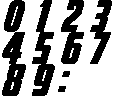
<style>
.page{position:relative;width:116px;height:96px;background:#ffffff}
.page>*{position:absolute;margin:0}
.t1{font:41px "Avengeance";letter-spacing:0.05em;color:#000000;font-weight:bold}
.t2{font:42px "Avengeance";letter-spacing:0.05em;color:#000000;font-weight:bold}
.t3{font:41.5px "Avengeance";letter-spacing:0.05em;color:#000000;font-weight:bold}
.t4{font:39px "Avengeance";letter-spacing:0.05em;color:#000000;font-weight:bold}
</style>
<div class="page">
<p class="t1" style="left:4px;top:0px;width:21px;height:32px">0</p>
<p class="t2" style="left:36px;top:0px;width:16px;height:32px">1</p>
<p class="t3" style="left:61px;top:0px;width:23px;height:32px">2</p>
<p class="t3" style="left:90px;top:0px;width:22px;height:32px">3</p>
<p class="t2" style="left:2px;top:32px;width:23px;height:32px">4</p>
<p class="t3" style="left:32px;top:32px;width:22px;height:32px">5</p>
<p class="t3" style="left:61px;top:32px;width:23px;height:32px">6</p>
<p class="t3" style="left:90px;top:32px;width:21px;height:32px">7</p>
<p class="t3" style="left:2px;top:64px;width:24px;height:32px">8</p>
<p class="t3" style="left:32px;top:64px;width:23px;height:32px">9</p>
<p class="t4" style="left:58px;top:71px;width:12px;height:21px">:</p>
</div>
